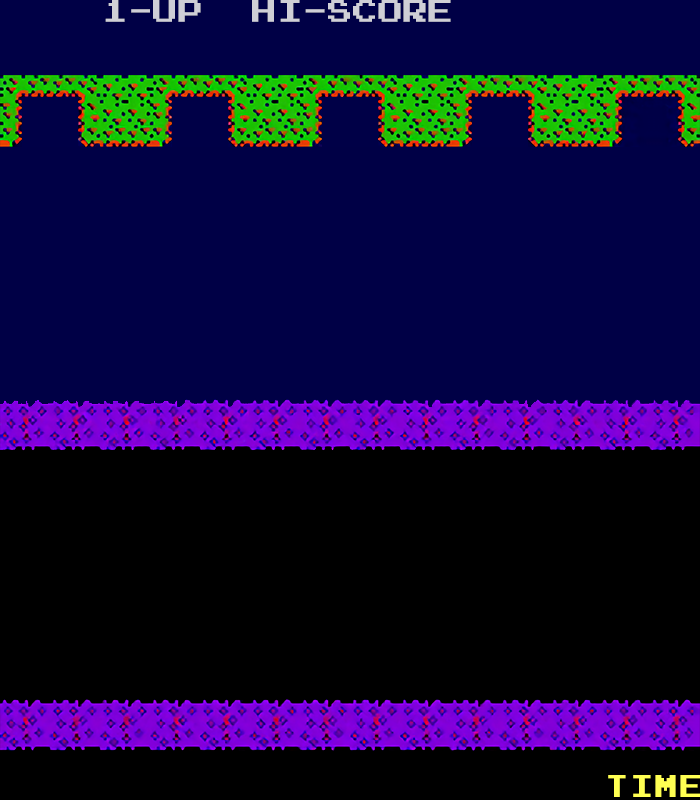
<style>
.page{position:relative;width:700px;height:800px;background:#000046}
.page>*{position:absolute;margin:0}
.t1{font:25.2px "PressStart2P";color:#cfcfd6}
.t2{font:25px "PressStart2P";letter-spacing:0.1em;color:#ffff52;scale:0.91 1}
</style>
<div class="page">
<p class="t1" style="left:105px;top:0px;width:96px;height:22px">1-UP</p>
<p class="t1" style="left:252px;top:0px;width:199px;height:22px">HI-SCORE</p>
<p class="t2" style="left:608px;top:775px;width:93px;height:22px">TIME</p>
</div>
